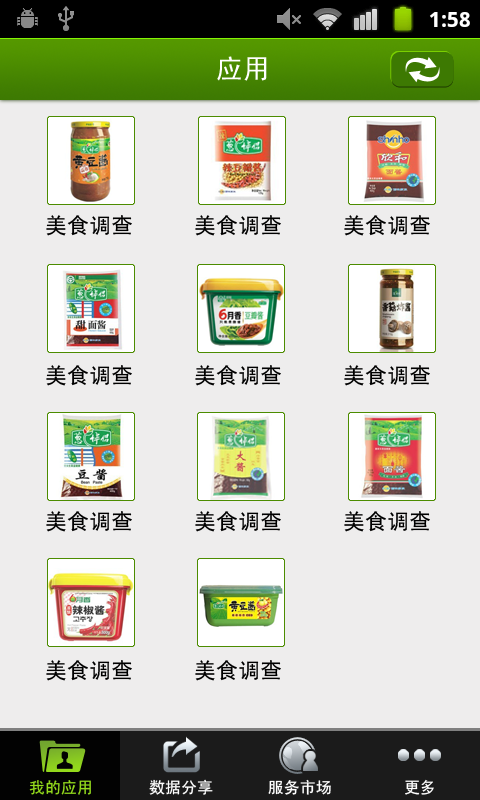
<style>
.page{position:relative;width:480px;height:800px;background:#eeeded}
.page>*{position:absolute;margin:0}
.t1{font:27px "SimHei";color:#ffffff}
.t2{font:22px "SimHei";color:#000000}
.t3{font:16px "SimHei";color:#94db1c}
.t4{font:16px "SimHei";color:#ffffff}
</style>
<div class="page">
<p class="t1" style="left:217px;top:56px;width:50px;height:25px">应用</p>
<p class="t2" style="left:46px;top:215px;width:86px;height:21px">美食调查</p>
<p class="t2" style="left:195px;top:215px;width:86px;height:21px">美食调查</p>
<p class="t2" style="left:344px;top:215px;width:86px;height:21px">美食调查</p>
<p class="t2" style="left:46px;top:365px;width:86px;height:21px">美食调查</p>
<p class="t2" style="left:195px;top:365px;width:86px;height:21px">美食调查</p>
<p class="t2" style="left:344px;top:365px;width:86px;height:21px">美食调查</p>
<p class="t2" style="left:46px;top:511px;width:86px;height:21px">美食调查</p>
<p class="t2" style="left:195px;top:511px;width:86px;height:21px">美食调查</p>
<p class="t2" style="left:344px;top:511px;width:86px;height:21px">美食调查</p>
<p class="t2" style="left:46px;top:660px;width:86px;height:21px">美食调查</p>
<p class="t2" style="left:195px;top:660px;width:86px;height:21px">美食调查</p>
<p class="t3" style="left:29px;top:780px;width:62px;height:15px">我的应用</p>
<p class="t4" style="left:149px;top:779px;width:64px;height:16px">数据分享</p>
<p class="t4" style="left:268px;top:779px;width:63px;height:16px">服务市场</p>
<p class="t4" style="left:405px;top:779px;width:29px;height:16px">更多</p>
</div>
